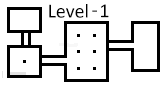
<style>
.page{position:relative;width:160px;height:90px;background:#ffffff}
.page>*{position:absolute;margin:0}
.t1{font:20px "Calibri";color:#000000}
.t2{font:20px "Calibri"}
</style>
<div class="page">
<p class="t1" style="left:49px;top:4px;width:39px;height:14px">Level</p>
<p class="t1" style="left:101px;top:4px;width:8px;height:14px">1</p>
<p class="t2" style="left:92px;top:10px;width:5px;height:2px">-</p>
</div>
